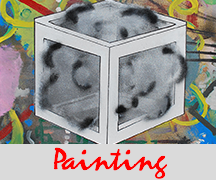
<style>
.page{position:relative;width:216px;height:180px}
.page>*{position:absolute;margin:0}
.t1{font:32px "ZephyrScriptFLF";color:#ff0000}
</style>
<div class="page">
<p class="t1" style="left:53px;top:147px;width:114px;height:32px">Painting</p>
</div>
